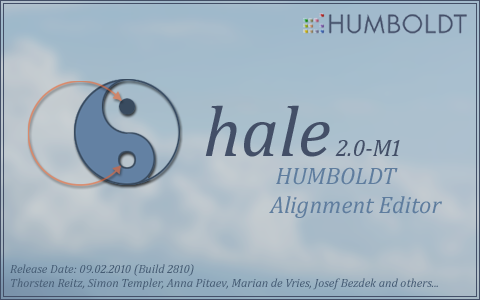
<style>
.page{position:relative;width:480px;height:300px}
.page>*{position:absolute;margin:0}
.t1{font:24px "Cambria-Italic";color:#434f67}
.t2{font:72px "Cambria-Italic";color:#434f67}
.t3{font:24px "Cambria-Italic";color:#5f7d9e}
.t4{font:12px "Cambria-Italic";color:#455b73}
</style>
<div class="page">
<p class="t1" style="left:205px;top:105px;width:195px;height:52px"><span class="t2">hale</span> 2.0-M1</p>
<p class="t3" style="left:269px;top:167px;width:173px;height:51px">HUMBOLDT <br>Alignment Editor</p>
<p class="t4" style="left:10px;top:264px;width:428px;height:26px">Release Date: 09.02.2010 (Build 2810)<br>Thorsten Reitz, Simon Templer, Anna Pitaev, Marian de Vries, Josef Bezdek and others...</p>
</div>
